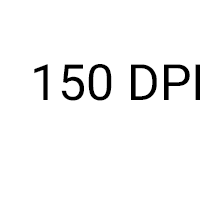
<style>
.page{position:relative;width:200px;height:200px;background:#ffffff}
.page>*{position:absolute;margin:0}
.t1{font:50px "Roboto-Regular";color:#000000}
</style>
<div class="page">
<p class="t1" style="left:34px;top:64px;width:167px;height:37px">150 DPI</p>
</div>
